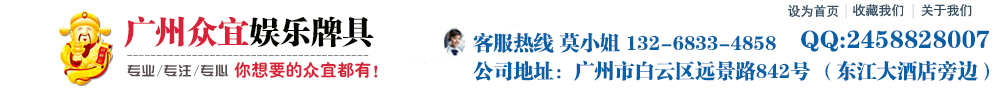
<style>
.page{position:relative;width:1000px;height:90px;background:#ffffff}
.page>*{position:absolute;margin:0}
.t1{font:31.2px "FZCSJW--GB1-0";color:#d72237}
.t2{font:31.2px "FZCSJW--GB1-0";color:#040400}
.t3{font:25.2px "FZCSJW--GB1-0";color:#0560a6}
.t4{font:20.2px "FZCSJW--GB1-0";color:#0560a6}
.t5{font:17.2px "HYe4gj";color:#d72237}
</style>
<div class="page">
<p class="t1" style="left:124px;top:16px;width:250px;height:32px">广州众宜<span class="t2">娱乐牌具</span></p>
<p class="t3" style="left:801px;top:30px;width:188px;height:22px">QQ:2458828007</p>
<p class="t4" style="left:473px;top:32px;width:303px;height:21px">客服热线 莫小姐 132-6833-4858</p>
<p class="t5" style="left:234px;top:61px;width:144px;height:17px">你想要的众宜都有!</p>
<p class="t4" style="left:473px;top:60px;width:516px;height:21px">公司地址：广州市白云区远景路842号 （东江大酒店旁边）</p>
</div>
